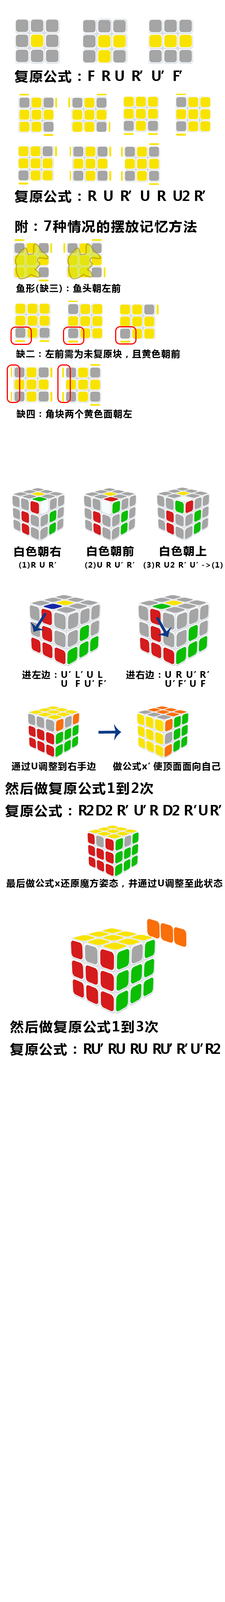
<style>
.page{position:relative;width:225px;height:1602px;background:#ffffff}
.page>*{position:absolute;margin:0}
.t1{font:13.5px "MicrosoftYaHei-Bold";letter-spacing:-0.105em;color:#000000}
.t2{font:13.5px "MicrosoftYaHei-Bold";letter-spacing:0.075em;color:#000000}
.t3{font:9px "MicrosoftYaHei-Bold";letter-spacing:0.075em;color:#000000}
.t4{font:11.2px "MicrosoftYaHei-Bold";letter-spacing:0.075em;color:#000000}
.t5{font:7.5px "MicrosoftYaHei-Bold";letter-spacing:0.075em;color:#000000}
.t6{font:7.5px "MicrosoftYaHei-Bold";letter-spacing:-0.225em;color:#000000}
.t7{font:7.5px "MicrosoftYaHei-Bold";letter-spacing:-0.245em;color:#000000}
.t8{font:7.5px "MicrosoftYaHei-Bold";letter-spacing:-0.285em;color:#000000}
.t9{font:9px/9px "MicrosoftYaHei-Bold";letter-spacing:0.075em;color:#000000}
.t10{font:9px/9px "MicrosoftYaHei-Bold";letter-spacing:-0.285em;color:#000000}
.t11{font:9px/9px "MicrosoftYaHei-Bold";letter-spacing:-0.345em;color:#000000}
.t12{font:9px/9px "MicrosoftYaHei-Bold";letter-spacing:-0.325em;color:#000000}
.t13{font:9px/9px "MicrosoftYaHei-Bold";letter-spacing:-0.405em;color:#000000}
.t14{font:9px "MicrosoftYaHei-Bold";letter-spacing:-0.385em;color:#000000}
.t15{font:13.5px/22.5px "MicrosoftYaHei-Bold";letter-spacing:0.075em;color:#000000}
.t16{font:13.5px/22.5px "MicrosoftYaHei-Bold";letter-spacing:-0.105em;color:#000000}
.t17{font:13.5px/22.5px "MicrosoftYaHei-Bold";letter-spacing:-0.345em;color:#000000}
.t18{font:13.5px/22.5px "MicrosoftYaHei-Bold";letter-spacing:-0.505em;color:#000000}
.t19{font:13.5px/22.5px "MicrosoftYaHei-Bold";letter-spacing:-0.625em;color:#000000}
.t20{font:13.5px/22.5px "MicrosoftYaHei-Bold";letter-spacing:-0.425em;color:#000000}
.t21{font:13.5px/22.5px "MicrosoftYaHei-Bold";letter-spacing:-0.465em;color:#000000}
.t22{font:13.5px/22.5px "MicrosoftYaHei-Bold";letter-spacing:-0.545em;color:#000000}
.t23{font:13.5px/22.5px "MicrosoftYaHei-Bold";letter-spacing:-0.605em;color:#000000}
</style>
<div class="page">
<p class="t1" style="left:15px;top:70px;width:167px;height:13px"><span class="t2">复原公式：</span>F   R  U   R’U’F’</p>
<p class="t1" style="left:15px;top:190px;width:191px;height:13px"><span class="t2">复原公式：</span>R   U   R’U   R   U2  R’</p>
<p class="t2" style="left:15px;top:220px;width:182px;height:13px">附：7种情况的摆放记忆方法</p>
<p class="t3" style="left:16px;top:284px;width:105px;height:9px">鱼形(缺三)：鱼头朝左前</p>
<p class="t3" style="left:16px;top:350px;width:164px;height:8px">缺二：左前需为未复原块，且黄色朝前</p>
<p class="t3" style="left:16px;top:410px;width:116px;height:8px">缺四：角块两个黄色面朝左</p>
<p class="t4" style="left:14px;top:546px;width:47px;height:11px">白色朝右</p>
<p class="t4" style="left:87px;top:546px;width:47px;height:10px">白色朝前</p>
<p class="t4" style="left:160px;top:546px;width:47px;height:10px">白色朝上</p>
<p class="t5" style="left:19px;top:562px;width:37px;height:7px">(1)R U R’</p>
<p class="t5" style="left:85px;top:562px;width:50px;height:7px">(2)U R U<span class="t6">’ </span>R’</p>
<p class="t5" style="left:144px;top:562px;width:79px;height:7px">(3)R U2 R<span class="t7">’</span>U<span class="t8">’</span>-&gt;(1)</p>
<p class="t9" style="left:22px;top:670px;width:84px;height:17px">进左边：U<span class="t10">’</span>L<span class="t11">’</span>U L <br>            U  F U<span class="t12">’</span>F’</p>
<p class="t9" style="left:126px;top:670px;width:83px;height:17px">进右边：U R U<span class="t12">’</span>R’<br>            U<span class="t13">’</span>F<span class="t11">’</span>U F</p>
<p class="t3" style="left:12px;top:762px;width:84px;height:9px">通过U调整到右手边</p>
<p class="t3" style="left:113px;top:762px;width:107px;height:9px">做公式x<span class="t14">’</span>使顶面面向自己</p>
<p class="t15" style="left:5px;top:782px;width:217px;height:36px">然后做复原公式1到2次<br>复原公式：<span class="t16">R2 D2  R</span><span class="t17">’</span><span class="t16">U</span><span class="t18">’</span><span class="t16">R  D2  R</span><span class="t19">’</span><span class="t16">U R’</span></p>
<p class="t3" style="left:6px;top:879px;width:217px;height:9px">最后做公式x还原魔方姿态，并通过U调整至此状态</p>
<p class="t15" style="left:10px;top:1021px;width:210px;height:35px">然后做复原公式1到3次<br>复原公式：<span class="t16">RU</span><span class="t20">’</span><span class="t16">RU  RU  RU</span><span class="t21">’</span><span class="t16">R</span><span class="t22">’</span><span class="t16">U</span><span class="t23">’</span><span class="t16">R2</span></p>
</div>
